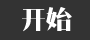
<style>
.page{position:relative;width:90px;height:40px;background:#333333}
.page>*{position:absolute;margin:0}
.t1{font:24px "MFLangSong_Noncommercial-Regular";color:#ffffff;scale:1.26 1}
</style>
<div class="page">
<p class="t1" style="left:22px;top:7px;width:50px;height:25px">开始</p>
</div>
